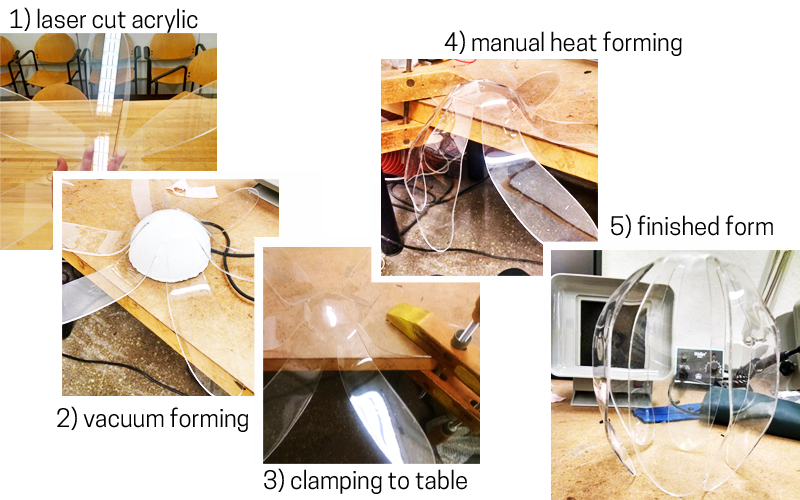
<style>
.page{position:relative;width:800px;height:500px;background:#ffffff}
.page>*{position:absolute;margin:0}
.t1{font:24px "CooperHewitt-Book";color:#000000}
</style>
<div class="page">
<p class="t1" style="left:10px;top:7px;width:188px;height:26px">1) laser cut acrylic</p>
<p class="t1" style="left:444px;top:30px;width:238px;height:26px">4) manual heat forming</p>
<p class="t1" style="left:611px;top:214px;width:162px;height:24px">5) finished form</p>
<p class="t1" style="left:57px;top:406px;width:191px;height:26px">2) vacuum forming</p>
<p class="t1" style="left:264px;top:468px;width:203px;height:26px">3) clamping to table</p>
</div>
